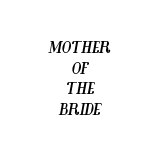
<style>
.page{position:relative;width:156px;height:153px;background:#ffffff}
.page>*{position:absolute;margin:0}
.t1{font:17px "Glamor-BoldCondensedItalic";color:#000000}
</style>
<div class="page">
<p class="t1" style="left:48px;top:41px;width:63px;height:74px;text-align:center">MOTHER<br>OF<br>THE<br>BRIDE</p>
</div>
